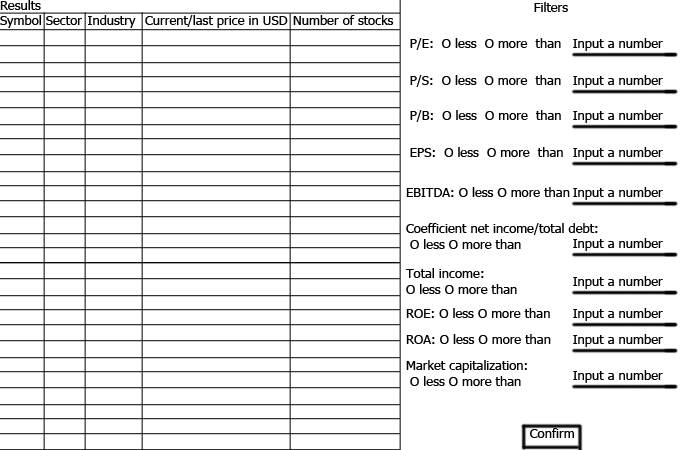
<style>
.page{position:relative;width:700px;height:450px;background:#ffffff}
.page>*{position:absolute;margin:0}
.t1{font:13px "Tahoma";color:#000000}
</style>
<div class="page">
<p class="t1" style="left:0px;top:0px;width:41px;height:28px">Results<br>Symbol</p>
<p class="t1" style="left:534px;top:2px;width:34px;height:10px">Filters</p>
<p class="t1" style="left:46px;top:16px;width:36px;height:9px">Sector</p>
<p class="t1" style="left:88px;top:15px;width:48px;height:13px">Industry</p>
<p class="t1" style="left:145px;top:15px;width:143px;height:13px">Current/last price in USD</p>
<p class="t1" style="left:293px;top:15px;width:101px;height:10px">Number of stocks</p>
<p class="t1" style="left:410px;top:38px;width:151px;height:12px">P/E:  O less  O more  than</p>
<p class="t1" style="left:410px;top:75px;width:151px;height:12px">P/S:  O less  O more  than</p>
<p class="t1" style="left:410px;top:110px;width:151px;height:12px">P/B:  O less  O more  than</p>
<p class="t1" style="left:410px;top:147px;width:153px;height:10px">EPS:  O less  O more  than</p>
<p class="t1" style="left:406px;top:187px;width:164px;height:10px">EBITDA: O less O more than</p>
<p class="t1" style="left:406px;top:223px;width:192px;height:26px">Coefficient net income/total debt:<br> O less O more than</p>
<p class="t1" style="left:405px;top:268px;width:112px;height:26px">Total income: <br>O less O more than</p>
<p class="t1" style="left:406px;top:308px;width:144px;height:10px">ROE: O less O more than</p>
<p class="t1" style="left:406px;top:334px;width:145px;height:10px">ROA: O less O more than</p>
<p class="t1" style="left:406px;top:360px;width:121px;height:26px">Market capitalization:<br> O less O more than</p>
</div>
